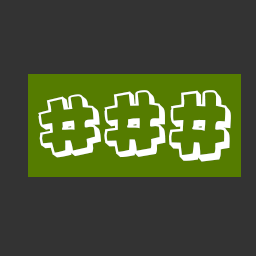
<style>
.page{position:relative;width:256px;height:256px;background:#333333}
.page>*{position:absolute;margin:0}
.t1{font:72px "AgentOrange";color:#ffffff}
</style>
<div class="page">
<p class="t1" style="left:38px;top:90px;width:193px;height:72px">###</p>
</div>
